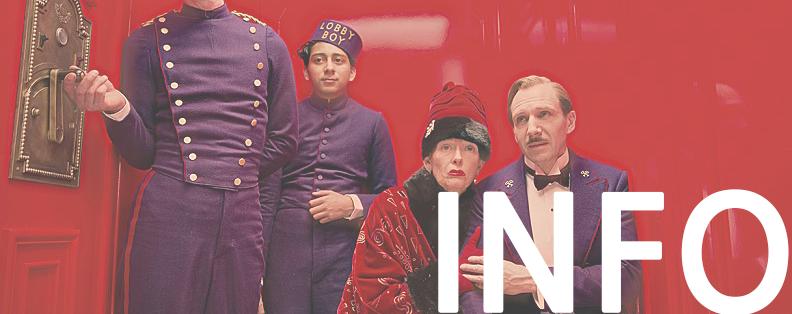
<style>
.page{position:relative;width:792px;height:314px}
.page>*{position:absolute;margin:0}
.t1{font:157.9px "NanumGothicBold";color:#ffffff;font-weight:bold}
</style>
<div class="page">
<p class="t1" style="left:438px;top:189px;width:351px;height:127px">INFO</p>
</div>
